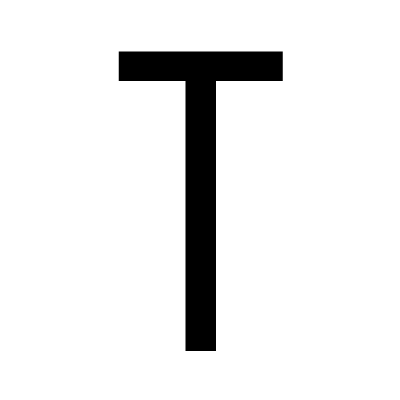
<style>
.page{position:relative;width:400px;height:400px;background:#ffffff}
.page>*{position:absolute;margin:0}
.t1{font:416.7px "CenturyGothic";color:#000000}
</style>
<div class="page">
<p class="t1" style="left:118px;top:51px;width:165px;height:300px">T</p>
</div>
